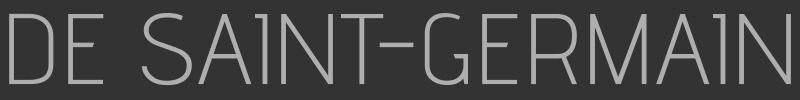
<style>
.page{position:relative;width:800px;height:100px;background:#333333}
.page>*{position:absolute;margin:0}
.t1{font:100.1px "AdventPro-Light";color:#aeaeae;scale:1.05 1}
</style>
<div class="page">
<p class="t1" style="left:9px;top:13px;width:782px;height:73px">DE SAINT-GERMAIN</p>
</div>
